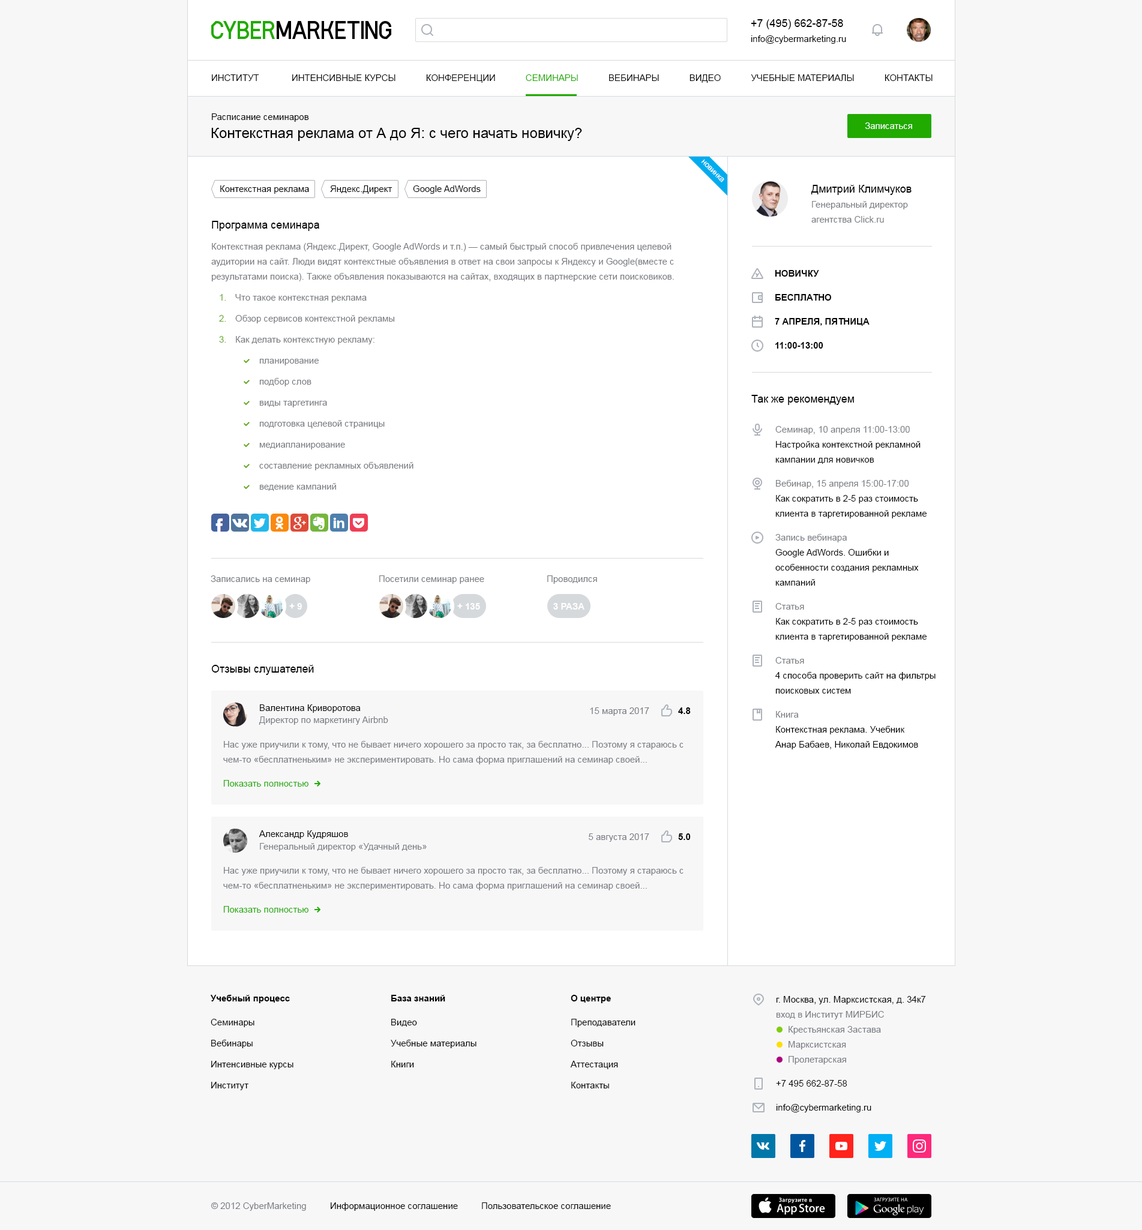
<style>
.page{position:relative;width:1142px;height:1230px;background:#f7f7f8}
.page>*{position:absolute;margin:0}
.t1{font:10.8px "ArialMT";color:#000000}
.t2{font:9px "ArialMT";color:#000000}
.t3{font:9px "ArialMT";color:#000000;text-transform:uppercase}
.t4{font:9px "ArialMT";color:#21aa00;text-transform:uppercase}
.t5{font:9px "ArialMT";color:#ffffff}
.t6{font:14.4px "ArialMT";color:#000000}
.t7{font:9px/15px "ArialMT";color:#787a80}
.t8{font:9px "Arial-BoldMT";color:#000000;text-transform:uppercase}
.t9{font:9px/21px "ArialMT";color:#63a824}
.t10{font:9px/21px "ArialMT";color:#787a80}
.t11{font:9px "ArialMT";color:#787b81}
.t12{font:9px/15px "ArialMT";color:#000000}
.t13{font:9px "ArialMT";color:#787a80}
.t14{font:9px "Arial-BoldMT";color:#ffffff;text-transform:uppercase}
.t15{font:9px "Arial-BoldMT";color:#000000}
.t16{font:9px/15px "ArialMT";color:#787b81}
.t17{font:9px "ArialMT";color:#21aa00}
.t18{font:9px/21px "ArialMT";color:#000000}
.t19{font:9px/24px "ArialMT";color:#000000}
</style>
<div class="page">
<p class="t1" style="left:751px;top:19px;width:92px;height:10px">+7 (495) 662-87-58</p>
<p class="t2" style="left:751px;top:35px;width:95px;height:9px">info@cybermarketing.ru</p>
<p class="t3" style="left:212px;top:74px;width:720px;height:9px">Институт             Интенсивные курсы            конференции            <span class="t4">Семинары     </span>       вебинары            Видео            Учебные материалы            Контакты</p>
<p class="t2" style="left:212px;top:113px;width:97px;height:9px">Расписание семинаров</p>
<p class="t5" style="left:865px;top:122px;width:47px;height:7px">Записаться</p>
<p class="t6" style="left:211px;top:128px;width:371px;height:13px">Контекстная реклама от А до Я: с чего начать новичку?</p>
<p class="t2" style="left:220px;top:185px;width:89px;height:9px">Контекстная реклама</p>
<p class="t2" style="left:330px;top:185px;width:62px;height:9px">Яндекс.Директ</p>
<p class="t2" style="left:413px;top:185px;width:68px;height:9px">Google AdWords</p>
<p class="t1" style="left:811px;top:185px;width:100px;height:10px">Дмитрий Климчуков</p>
<p class="t7" style="left:811px;top:201px;width:97px;height:22px">Генеральный директор<br>агентства Click.ru</p>
<p class="t1" style="left:212px;top:221px;width:107px;height:10px">Программа семинара</p>
<p class="t7" style="left:211px;top:243px;width:463px;height:38px">Контекстная реклама (Яндекс.Директ, Google AdWords и т.п.) — самый быстрый способ привлечения целевой <br>аудитории на сайт. Люди видят контекстные объявления в ответ на свои запросы к Яндексу и Google(вместе с <br>результатами поиска). Также объявления показываются на сайтах, входящих в партнерские сети поисковиков.</p>
<p class="t8" style="left:775px;top:270px;width:44px;height:7px">Новичку</p>
<p class="t9" style="left:219px;top:294px;width:7px;height:49px">1.<br>2.<br>3.</p>
<p class="t10" style="left:235px;top:294px;width:160px;height:50px">Что такое контекстная реклама<br>Обзор сервисов контекстной рекламы<br>Как делать контекстную рекламу:</p>
<p class="t8" style="left:775px;top:294px;width:56px;height:7px">Бесплатно</p>
<p class="t8" style="left:775px;top:318px;width:94px;height:8px">7 апреля, пятница</p>
<p class="t8" style="left:775px;top:342px;width:48px;height:7px">11:00-13:00</p>
<p class="t10" style="left:259px;top:359px;width:154px;height:132px">планирование<br>подбор слов<br>виды таргетинга<br>подготовка целевой страницы<br>медиапланирование<br>составление рекламных объявлений<br>ведение кампаний</p>
<p class="t1" style="left:751px;top:395px;width:103px;height:10px">Так же рекомендуем</p>
<p class="t11" style="left:775px;top:426px;width:135px;height:8px">Семинар, 10 апреля 11:00-13:00</p>
<p class="t12" style="left:775px;top:441px;width:145px;height:23px">Настройка контекстной рекламной <br>кампании для новичков</p>
<p class="t11" style="left:776px;top:480px;width:133px;height:8px">Вебинар, 15 апреля 15:00-17:00</p>
<p class="t12" style="left:775px;top:495px;width:152px;height:23px">Как сократить в 2-5 раз стоимость <br>клиента в таргетированной рекламе</p>
<p class="t11" style="left:775px;top:534px;width:72px;height:8px">Запись вебинара</p>
<p class="t12" style="left:775px;top:549px;width:144px;height:37px">Google AdWords. Ошибки и <br>особенности создания рекламных <br>кампаний</p>
<p class="t13" style="left:211px;top:575px;width:99px;height:9px">Записались на семинар</p>
<p class="t13" style="left:379px;top:575px;width:105px;height:9px">Посетили семинар ранее</p>
<p class="t13" style="left:547px;top:575px;width:50px;height:9px">Проводился</p>
<p class="t14" style="left:289px;top:603px;width:13px;height:7px">+ 9</p>
<p class="t14" style="left:457px;top:603px;width:23px;height:7px">+ 135</p>
<p class="t14" style="left:553px;top:603px;width:31px;height:7px">3 раза</p>
<p class="t11" style="left:775px;top:603px;width:29px;height:7px">Статья</p>
<p class="t12" style="left:775px;top:618px;width:152px;height:23px">Как сократить в 2-5 раз стоимость <br>клиента в таргетированной рекламе</p>
<p class="t1" style="left:211px;top:665px;width:103px;height:10px">Отзывы слушателей</p>
<p class="t11" style="left:775px;top:657px;width:29px;height:7px">Статья</p>
<p class="t12" style="left:775px;top:672px;width:160px;height:22px">4 способа проверить сайт на фильтры <br>поисковых систем</p>
<p class="t2" style="left:260px;top:704px;width:101px;height:9px">Валентина Криворотова</p>
<p class="t13" style="left:590px;top:707px;width:59px;height:9px">15 марта 2017</p>
<p class="t15" style="left:678px;top:707px;width:13px;height:7px">4.8</p>
<p class="t11" style="left:776px;top:711px;width:23px;height:7px">Книга</p>
<p class="t11" style="left:259px;top:716px;width:129px;height:9px">Директор по маркетингу Airbnb</p>
<p class="t12" style="left:775px;top:726px;width:143px;height:23px">Контекстная реклама. Учебник<br>Анар Бабаев, Николай Евдокимов</p>
<p class="t16" style="left:223px;top:741px;width:460px;height:23px">Нас уже приучили к тому, что не бывает ничего хорошего за просто так, за бесплатно... Поэтому я стараюсь с чем-то «бесплатненьким» не экспериментировать. Но сама форма приглашений на семинар своей...<br><br><br> стороной заставила подумать: а вдруг?.. И я сходила на «продвинутый» семинар...</p>
<p class="t17" style="left:223px;top:780px;width:85px;height:7px">Показать полностью</p>
<p class="t2" style="left:259px;top:830px;width:89px;height:9px">Александр Кудряшов</p>
<p class="t13" style="left:589px;top:833px;width:60px;height:9px">5 августа 2017</p>
<p class="t15" style="left:678px;top:833px;width:13px;height:7px">5.0</p>
<p class="t11" style="left:260px;top:843px;width:167px;height:8px">Генеральный директор «Удачный день»</p>
<p class="t16" style="left:223px;top:867px;width:460px;height:23px">Нас уже приучили к тому, что не бывает ничего хорошего за просто так, за бесплатно... Поэтому я стараюсь с чем-то «бесплатненьким» не экспериментировать. Но сама форма приглашений на семинар своей...<br><br><br> стороной заставила подумать: а вдруг?.. И я сходила на «продвинутый» семинар...</p>
<p class="t17" style="left:223px;top:906px;width:85px;height:7px">Показать полностью</p>
<p class="t15" style="left:210px;top:995px;width:80px;height:8px">Учебный процесс</p>
<p class="t15" style="left:391px;top:995px;width:54px;height:6px">База знаний</p>
<p class="t15" style="left:571px;top:995px;width:40px;height:8px">О центре</p>
<p class="t12" style="left:776px;top:996px;width:150px;height:23px">г. Москва, ул. Марксистская, д. 34к7<br><span class="t16">вход в Институт МИРБИС</span></p>
<p class="t18" style="left:211px;top:1019px;width:82px;height:71px">Семинары<br>Вебинары<br>Интенсивные курсы<br>Институт</p>
<p class="t18" style="left:391px;top:1019px;width:85px;height:48px">Видео<br>Учебные материалы<br>Книги</p>
<p class="t18" style="left:570px;top:1019px;width:65px;height:69px">Преподаватели<br>Отзывы<br>Аттестация<br>Контакты</p>
<p class="t11" style="left:788px;top:1026px;width:93px;height:8px">Крестьянская Застава</p>
<p class="t11" style="left:788px;top:1041px;width:58px;height:8px">Марксистская</p>
<p class="t11" style="left:788px;top:1056px;width:58px;height:8px">Пролетарская</p>
<p class="t19" style="left:776px;top:1080px;width:95px;height:32px">+7 495 662-87-58<br>info@cybermarketing.ru</p>
<p class="t11" style="left:211px;top:1202px;width:95px;height:9px">© 2012 CyberMarketing</p>
<p class="t2" style="left:331px;top:1202px;width:127px;height:9px">Информационное соглашение</p>
<p class="t2" style="left:482px;top:1202px;width:129px;height:7px">Пользовательское соглашение</p>
</div>
